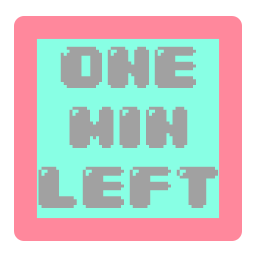
<style>
.page{position:relative;width:256px;height:256px;background:#88ffe4}
.page>*{position:absolute;margin:0}
.t1{font:50px "04b30";color:#a1a1a1}
</style>
<div class="page">
<p class="t1" style="left:38px;top:46px;width:180px;height:162px;text-align:center">ONE<br>MIN<br>LEFT</p>
</div>
